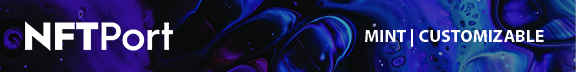
<style>
.page{position:relative;width:576px;height:72px}
.page>*{position:absolute;margin:0}
.t1{font:17.8px "MyriadPro-Bold";color:#ffffff}
</style>
<div class="page">
<p class="t1" style="left:365px;top:29px;width:179px;height:18px">MINT | CUSTOMIZABLE</p>
</div>
